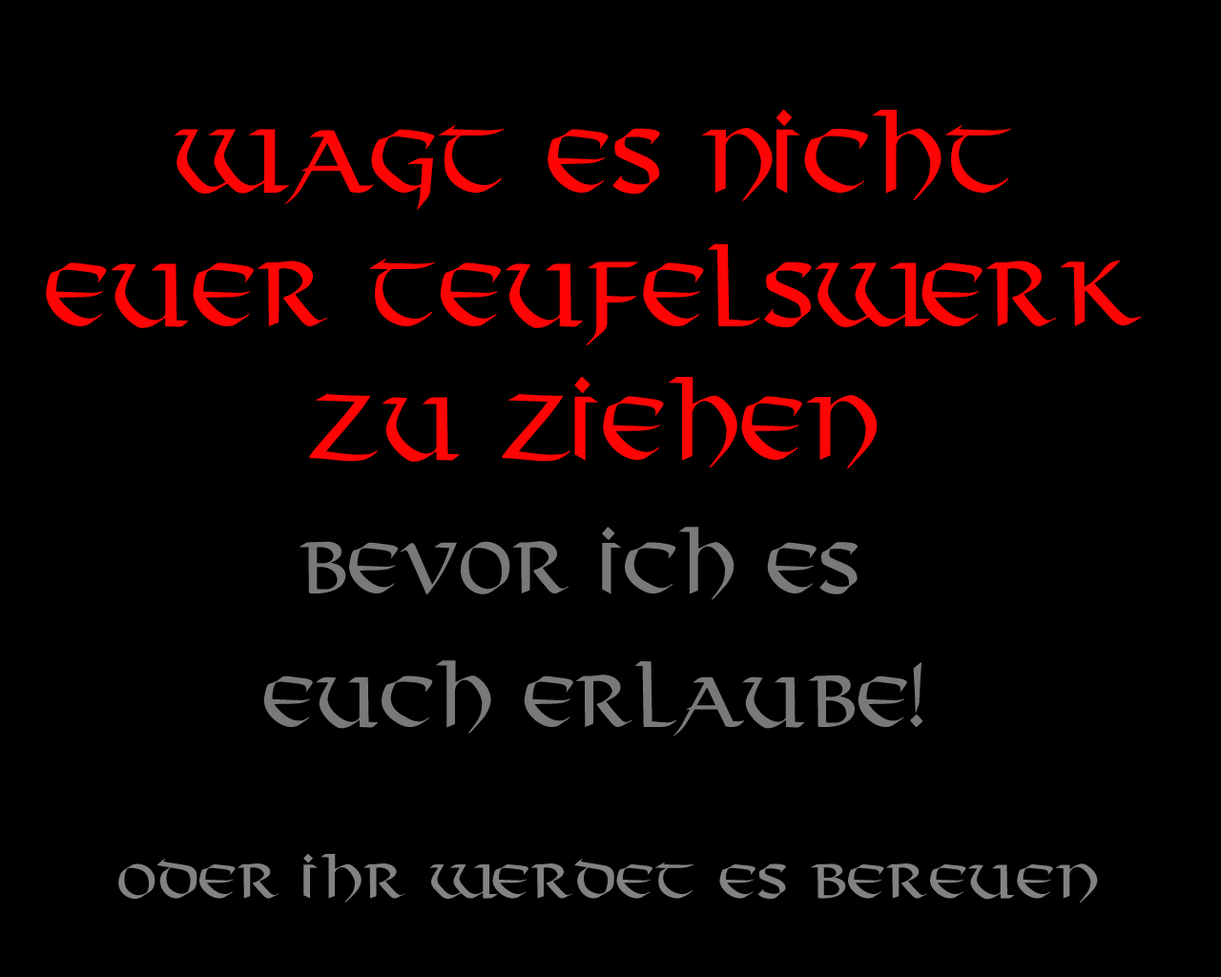
<style>
.page{position:relative;width:1221px;height:977px;background:#000000}
.page>*{position:absolute;margin:0}
.t1{font:85.8px/133.5px "VikingPlain";color:#fe0404;scale:0.9 1}
.t2{font:68.7px/133.5px "VikingPlain";color:#797979;scale:0.9 1}
.t3{font:45.8px "VikingPlain";color:#828282}
</style>
<div class="page">
<p class="t1" style="left:46px;top:109px;width:1096px;height:627px;text-align:center">Wagt es nicht<br>Euer Teufelswerk<br> zu ziehen <br><span class="t2">bevor ich es <br>Euch erlaube!</span></p>
<p class="t3" style="left:118px;top:854px;width:980px;height:49px">Oder Ihr werdet es bereuen</p>
</div>
